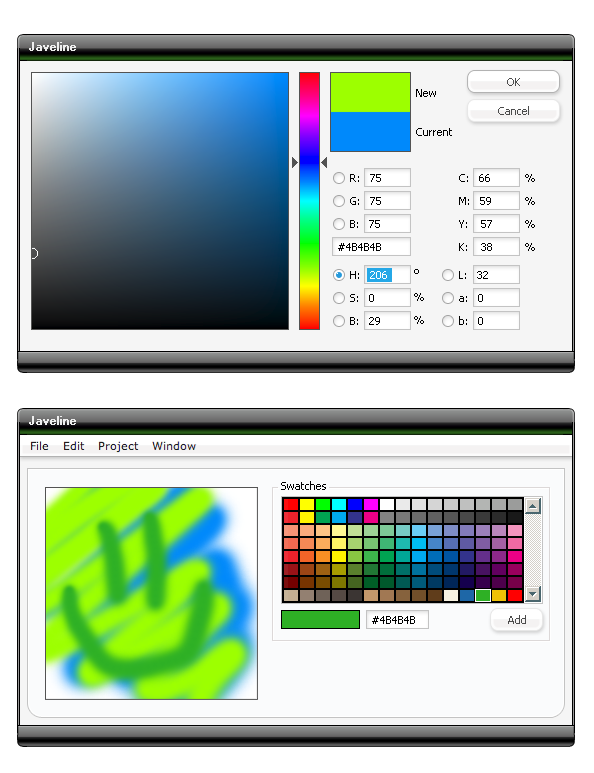
<style>
.page{position:relative;width:594px;height:773px;background:#ffffff}
.page>*{position:absolute;margin:0}
.t1{font:11px "Tahoma";color:#4b4b4b}
.t2{font:11px/13px "Tahoma";color:#000000}
.t3{font:11px/23px "Tahoma";color:#000000}
.t4{font:11px "Tahoma";color:#000000}
.t5{font:10px/27px "Tahoma";color:#000000}
.t6{font:11px/27px "Tahoma";color:#000000}
.t7{font:11px/23px "Tahoma";color:#ffffff}
</style>
<div class="page">
<p class="t1" style="left:507px;top:78px;width:13px;height:8px">OK</p>
<p class="t2" style="left:416px;top:89px;width:36px;height:47px">New<br><br><br>Current</p>
<p class="t1" style="left:498px;top:106px;width:31px;height:9px">Cancel</p>
<p class="t3" style="left:350px;top:174px;width:31px;height:54px">R:   75<br>G:   75<br>B:   75</p>
<p class="t3" style="left:459px;top:174px;width:33px;height:77px">C:   66<br>M:   59<br>Y:    57<br>K:    38</p>
<p class="t3" style="left:525px;top:174px;width:10px;height:77px">%<br>%<br>%<br>%</p>
<p class="t4" style="left:338px;top:243px;width:43px;height:8px">#4B4B4B</p>
<p class="t5" style="left:414px;top:269px;width:10px;height:55px">o<br><span class="t6">%<br></span><span class="t3">%</span></p>
<p class="t3" style="left:350px;top:271px;width:37px;height:54px">H:   <span class="t7">206<br></span>S:   0<br>B:   29</p>
<p class="t3" style="left:459px;top:271px;width:29px;height:54px">L:   32<br>a:   0<br>b:   0</p>
<p class="t4" style="left:281px;top:481px;width:45px;height:9px">Swatches</p>
<p class="t4" style="left:372px;top:616px;width:43px;height:8px">#4B4B4B</p>
<p class="t1" style="left:508px;top:615px;width:18px;height:9px">Add</p>
</div>
